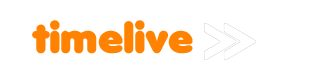
<style>
.page{position:relative;width:320px;height:80px;background:#ffffff}
.page>*{position:absolute;margin:0}
.t1{font:40.6px "Debussy";color:#ff8300}
</style>
<div class="page">
<p class="t1" style="left:32px;top:20px;width:161px;height:34px">timelive</p>
</div>
